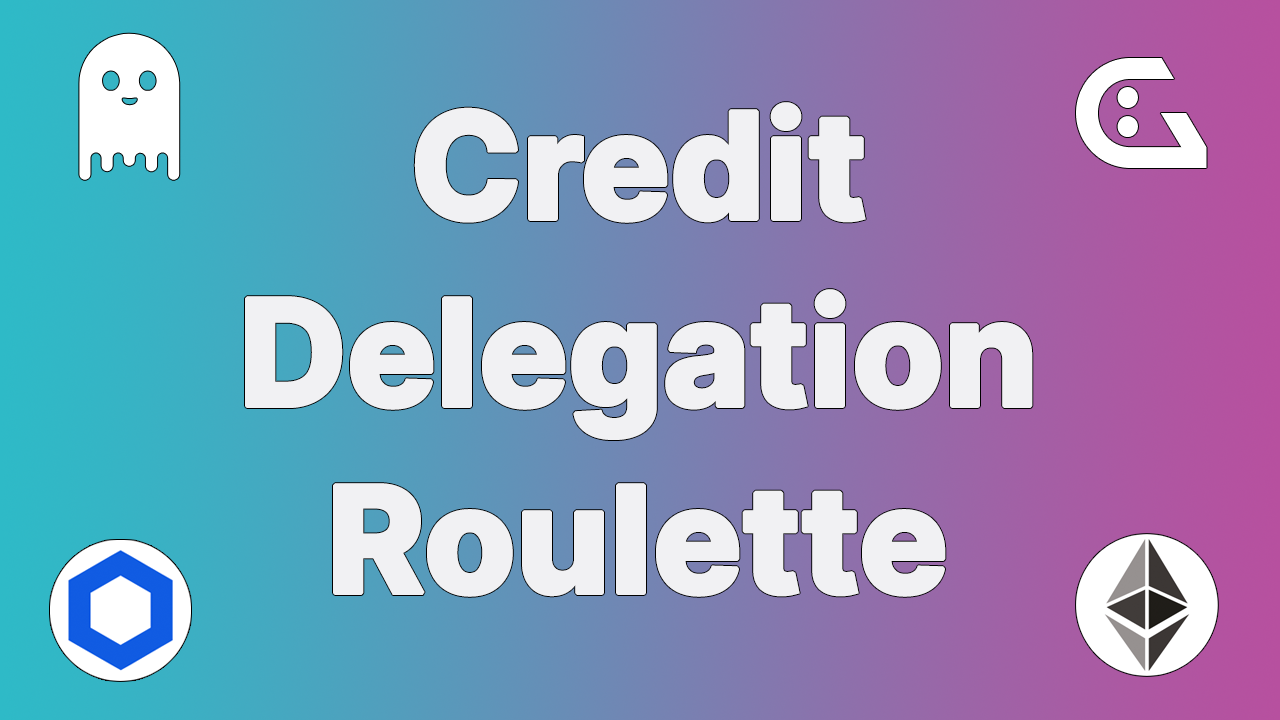
<style>
.page{position:relative;width:1280px;height:720px}
.page>*{position:absolute;margin:0}
.t1{font:148px/187px "Inter-ExtraBold";letter-spacing:-0.025em;color:#f1f1f3;font-weight:bold}
</style>
<div class="page">
<p class="t1" style="left:245px;top:102px;width:788px;height:495px;text-align:center">Credit Delegation Roulette</p>
</div>
